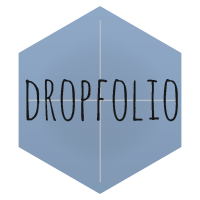
<style>
.page{position:relative;width:200px;height:200px;background:#ffffff}
.page>*{position:absolute;margin:0}
.t1{font:61px "AmaticSC-Regular";color:#171717}
</style>
<div class="page">
<p class="t1" style="left:25px;top:79px;width:153px;height:43px">dropfolio</p>
</div>
